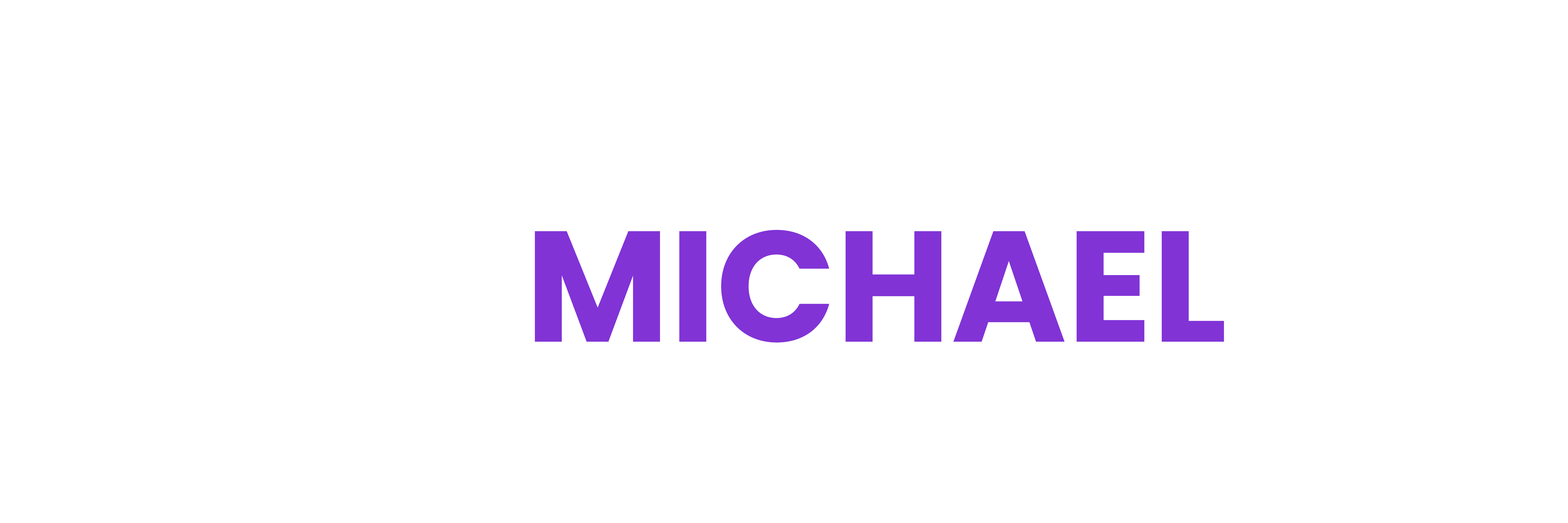
<style>
.page{position:relative;width:1568px;height:523px;background:#ffffff}
.page>*{position:absolute;margin:0}
.t1{font:157.3px "Poppins-Bold";color:#8133d6;text-transform:uppercase}
.t2{font:157.3px "Poppins-Bold";color:#ffffff;text-transform:uppercase}
</style>
<div class="page">
<p class="t1" style="left:535px;top:230px;width:1005px;height:112px">michael<span class="t2">dev</span></p>
</div>
